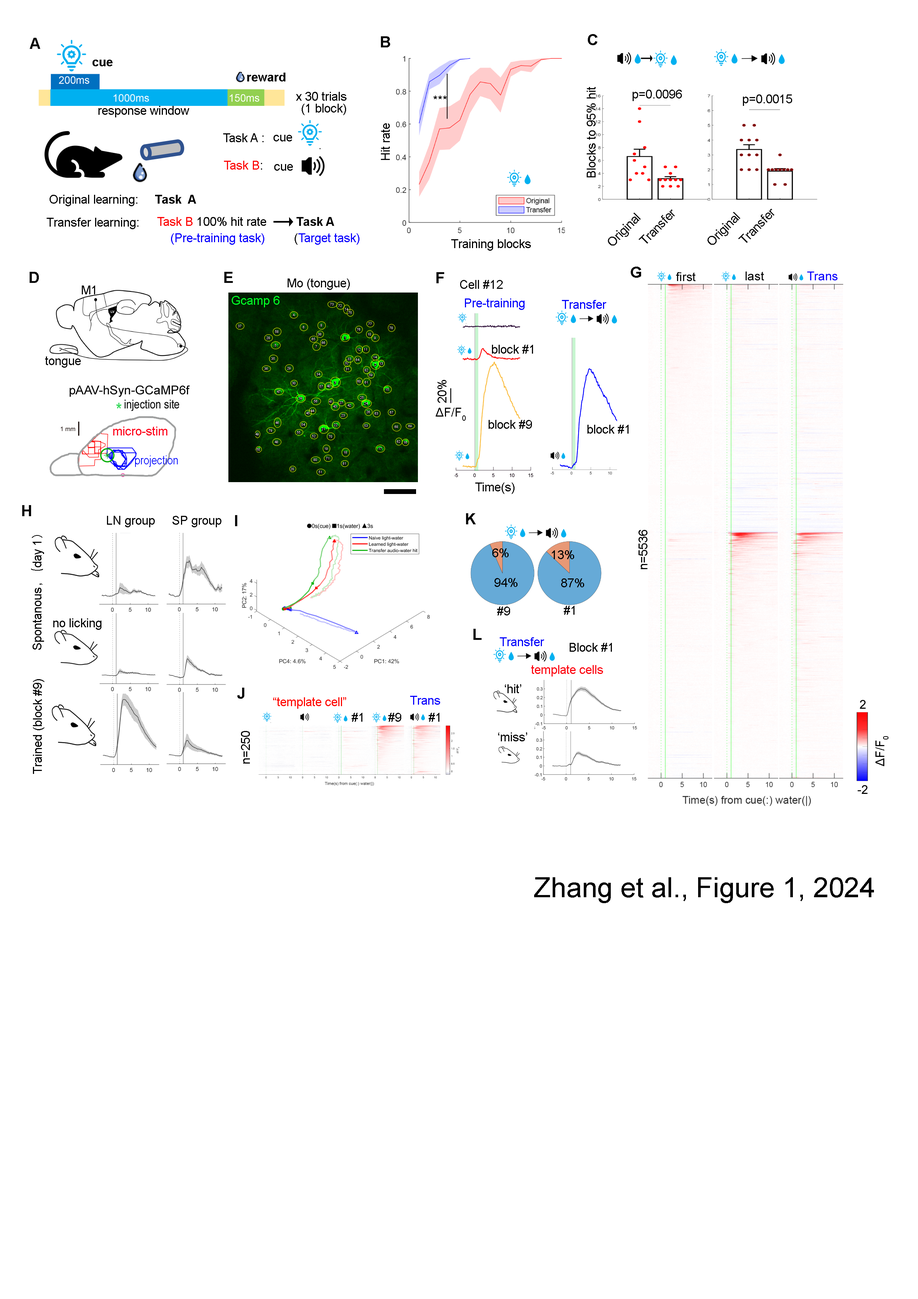
<style>
.page{position:relative;width:918px;height:1299px;background:#ffffff}
.page>*{position:absolute;margin:0}
.t1{font:15.4px "Arial-BoldMT";color:#070707}
.t2{font:12.3px "Arial-BoldMT";color:#000000}
.t3{font:12.3px "ArialMT";color:#070707}
.t4{font:12.3px "ArialMT";color:#000000}
.t5{font:12.3px "ArialMT";color:#fd0606}
.t6{font:12.3px "ArialMT";color:#fd0000}
.t7{font:12.3px "Arial-BoldMT";color:#070707}
.t8{font:12.3px "ArialMT";color:#0900ff}
.t9{font:12.3px "ArialMT";color:#0d04fe}
.t10{font:12.3px "ArialMT";color:#030303}
.t11{font:12.3px "ArialMT";color:#00ff24}
.t12{font:12.3px "ArialMT";color:#0303fc}
.t13{font:12.3px "ArialMT";color:#020202}
.t14{font:12.3px "ArialNarrow";color:#070707}
.t15{font:18.5px "ArialNarrow";color:#31d858}
.t16{font:12.3px "ArialMT";color:#fe031b}
.t17{font:12.3px "ArialNarrow";color:#0309fe}
.t18{font:12.3px "STHeitiSC-Light";color:#030303}
.t19{font:12.3px "ArialMT";color:#fd0813}
.t20{font:12.3px "ArialMT";color:#ff0600}
.t21{font:27.8px "ArialMT";color:#020202}
</style>
<div class="page">
<p class="t1" style="left:30px;top:38px;width:10px;height:11px">A</p>
<p class="t1" style="left:381px;top:36px;width:9px;height:11px">B</p>
<p class="t1" style="left:588px;top:34px;width:10px;height:11px">C</p>
<p class="t2" style="left:93px;top:60px;width:20px;height:6px">cue</p>
<p class="t2" style="left:247px;top:73px;width:38px;height:8px">reward</p>
<p class="t3" style="left:587px;top:87px;width:9px;height:90px;rotate:-90deg">Blocks to 95% hit</p>
<p class="t3" style="left:633px;top:90px;width:49px;height:11px">p=0.0096</p>
<p class="t4" style="left:296px;top:92px;width:51px;height:9px">x 30 trials</p>
<p class="t3" style="left:434px;top:96px;width:13px;height:3px">***</p>
<p class="t3" style="left:743px;top:94px;width:49px;height:12px">p=0.0015</p>
<p class="t4" style="left:98px;top:106px;width:91px;height:11px">response window</p>
<p class="t3" style="left:302px;top:104px;width:44px;height:11px">(1 block)</p>
<p class="t3" style="left:381px;top:123px;width:9px;height:37px;rotate:-90deg">Hit rate</p>
<p class="t4" style="left:223px;top:133px;width:41px;height:9px">Task A :</p>
<p class="t4" style="left:274px;top:135px;width:18px;height:6px">cue</p>
<p class="t5" style="left:224px;top:161px;width:38px;height:9px">Task B<span class="t4">:</span></p>
<p class="t4" style="left:274px;top:164px;width:19px;height:7px">cue</p>
<p class="t4" style="left:50px;top:195px;width:87px;height:11px">Original learning:</p>
<p class="t2" style="left:155px;top:195px;width:41px;height:9px">Task  A</p>
<p class="t3" style="left:639px;top:210px;width:36px;height:34px;rotate:-45deg">Transfer</p>
<p class="t3" style="left:738px;top:209px;width:37px;height:34px;rotate:-45deg">Transfer</p>
<p class="t4" style="left:47px;top:218px;width:91px;height:11px">Transfer learning:</p>
<p class="t4" style="left:157px;top:217px;width:109px;height:9px"><span class="t6">Task B</span> 100% hit rate</p>
<p class="t7" style="left:297px;top:217px;width:37px;height:9px">Task A</p>
<p class="t3" style="left:608px;top:213px;width:33px;height:32px;rotate:-45deg">Original</p>
<p class="t3" style="left:707px;top:212px;width:33px;height:33px;rotate:-45deg">Original</p>
<p class="t8" style="left:171px;top:233px;width:93px;height:12px">(Pre-training task)</p>
<p class="t9" style="left:295px;top:233px;width:64px;height:12px"><span class="t3">(</span>Target task)</p>
<p class="t4" style="left:451px;top:239px;width:80px;height:12px">Training blocks</p>
<p class="t1" style="left:631px;top:267px;width:10px;height:11px">G</p>
<p class="t1" style="left:30px;top:272px;width:9px;height:11px">D</p>
<p class="t1" style="left:224px;top:272px;width:9px;height:11px">E</p>
<p class="t3" style="left:288px;top:278px;width:62px;height:12px">Mo (tongue)</p>
<p class="t1" style="left:436px;top:272px;width:8px;height:11px">F</p>
<p class="t3" style="left:460px;top:280px;width:43px;height:9px">Cell #12</p>
<p class="t10" style="left:676px;top:272px;width:20px;height:9px">first</p>
<p class="t10" style="left:746px;top:271px;width:18px;height:10px">last</p>
<p class="t8" style="left:807px;top:271px;width:31px;height:10px">Trans</p>
<p class="t3" style="left:82px;top:285px;width:13px;height:9px">M1</p>
<p class="t11" style="left:232px;top:296px;width:48px;height:11px">Gcamp 6</p>
<p class="t12" style="left:465px;top:298px;width:60px;height:12px">Pre-training</p>
<p class="t12" style="left:562px;top:300px;width:44px;height:9px">Transfer</p>
<p class="t3" style="left:492px;top:345px;width:41px;height:9px">block #1</p>
<p class="t3" style="left:45px;top:356px;width:36px;height:12px">tongue</p>
<p class="t13" style="left:70px;top:385px;width:120px;height:12px">pAAV-hSyn-GCaMP6f</p>
<p class="t10" style="left:438px;top:380px;width:8px;height:23px;rotate:-90deg">20%</p>
<p class="t14" style="left:124px;top:399px;width:55px;height:12px">injection site</p>
<p class="t15" style="left:116px;top:402px;width:5px;height:7px">*</p>
<p class="t10" style="left:436px;top:408px;width:30px;height:13px">ΔF/F0</p>
<p class="t3" style="left:489px;top:420px;width:43px;height:9px">block #9</p>
<p class="t10" style="left:588px;top:425px;width:41px;height:9px">block #1</p>
<p class="t16" style="left:113px;top:426px;width:54px;height:9px">micro-stim</p>
<p class="t17" style="left:135px;top:455px;width:43px;height:12px">projection</p>
<p class="t3" style="left:475px;top:482px;width:40px;height:12px">Time(s)</p>
<p class="t1" style="left:22px;top:505px;width:9px;height:11px">H</p>
<p class="t10" style="left:107px;top:516px;width:114px;height:11px">LN group     SP group</p>
<p class="t1" style="left:466px;top:513px;width:10px;height:11px">K</p>
<p class="t10" style="left:639px;top:530px;width:9px;height:39px;rotate:-90deg">n=5536</p>
<p class="t10" style="left:31px;top:535px;width:13px;height:115px;rotate:-90deg">Spontanous<span class="t18">， (</span>day 1<span class="t18">）</span></p>
<p class="t13" style="left:492px;top:548px;width:17px;height:9px">6%</p>
<p class="t13" style="left:552px;top:550px;width:22px;height:9px">13%</p>
<p class="t13" style="left:495px;top:578px;width:23px;height:9px">94%</p>
<p class="t13" style="left:561px;top:578px;width:23px;height:9px">87%</p>
<p class="t13" style="left:564px;top:606px;width:11px;height:9px">#1</p>
<p class="t13" style="left:497px;top:606px;width:13px;height:9px">#9</p>
<p class="t10" style="left:53px;top:618px;width:48px;height:12px">no licking</p>
<p class="t1" style="left:474px;top:629px;width:8px;height:11px">L</p>
<p class="t12" style="left:500px;top:637px;width:44px;height:9px">Transfer</p>
<p class="t13" style="left:570px;top:643px;width:42px;height:9px">Block #1</p>
<p class="t19" style="left:531px;top:665px;width:72px;height:11px">template cells</p>
<p class="t10" style="left:33px;top:679px;width:11px;height:95px;rotate:-90deg">Trained (block #9)</p>
<p class="t1" style="left:237px;top:688px;width:7px;height:11px">J</p>
<p class="t13" style="left:505px;top:684px;width:16px;height:9px">‘hit’</p>
<p class="t20" style="left:273px;top:697px;width:73px;height:12px">“template cell”</p>
<p class="t8" style="left:410px;top:696px;width:30px;height:9px">Trans</p>
<p class="t10" style="left:860px;top:700px;width:6px;height:9px">2</p>
<p class="t13" style="left:352px;top:713px;width:10px;height:9px">#1</p>
<p class="t13" style="left:388px;top:713px;width:13px;height:9px">#9</p>
<p class="t13" style="left:429px;top:713px;width:10px;height:9px">#1</p>
<p class="t13" style="left:241px;top:731px;width:9px;height:32px;rotate:-90deg">n=250</p>
<p class="t13" style="left:498px;top:732px;width:29px;height:9px">‘miss’</p>
<p class="t10" style="left:876px;top:736px;width:13px;height:30px;rotate:-90deg">ΔF/F0</p>
<p class="t10" style="left:858px;top:785px;width:10px;height:9px">-2</p>
<p class="t21" style="left:534px;top:877px;width:340px;height:26px">Zhang et al., Figure 1, 2024</p>
</div>
